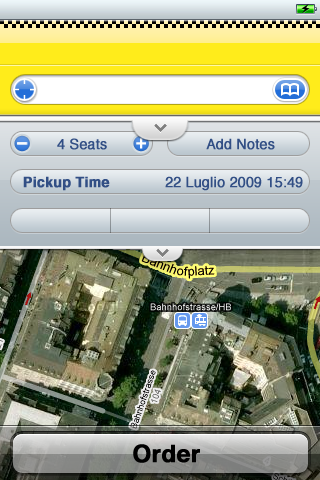
<style>
.page{position:relative;width:320px;height:480px}
.page>*{position:absolute;margin:0}
.t1{font:14px "Helvetica";color:#324f85;font-weight:bold}
.t2{font:14px "Helvetica-Bold";color:#324f85;font-weight:bold}
.t3{font:24px "Helvetica-Bold";color:#000000;font-weight:bold}
</style>
<div class="page">
<p class="t1" style="left:57px;top:138px;width:50px;height:12px">4 Seats</p>
<p class="t1" style="left:206px;top:138px;width:69px;height:12px">Add Notes</p>
<p class="t1" style="left:23px;top:176px;width:280px;height:15px"><span class="t2">Pickup Time</span>             22 Luglio 2009 15:49</p>
<p class="t3" style="left:133px;top:444px;width:67px;height:19px">Order</p>
</div>
